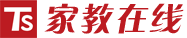
<style>
.page{position:relative;width:187px;height:38px;background:#ffffff}
.page>*{position:absolute;margin:0}
.t1{font:32px "FZCQJW--GB1-0";letter-spacing:0.1em;color:#bc1b21;font-style:italic}
</style>
<div class="page">
<p class="t1" style="left:44px;top:3px;width:140px;height:31px">家教在线</p>
</div>
